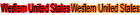
<style>
.page{position:relative;width:140px;height:15px;background:#ffffff}
.page>*{position:absolute;margin:0}
.t1{font:11px "ArialMT";color:#000000;scale:0.63 1}
</style>
<div class="page">
<p class="t1" style="left:1px;top:4px;width:69px;height:8px">Western United States</p>
<p class="t1" style="left:71px;top:4px;width:69px;height:8px">Western United States</p>
</div>
